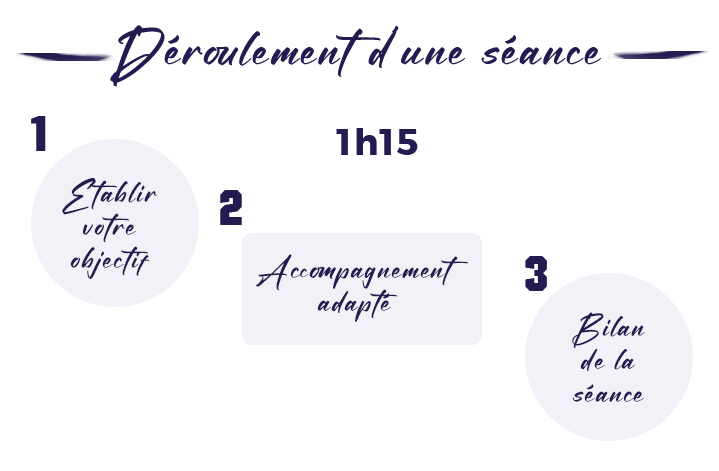
<style>
.page{position:relative;width:719px;height:471px;background:#ffffff}
.page>*{position:absolute;margin:0}
.t1{font:60px "Blacklist";letter-spacing:0.05em;color:#221c51}
.t2{font:48px "Autumn";letter-spacing:0.05em;color:#221c51}
.t3{font:36px "Gontserrat-Bold";letter-spacing:0.05em;color:#221c51}
.t4{font:36px/33px "Blacklist";letter-spacing:0.05em;color:#221c51}
</style>
<div class="page">
<p class="t1" style="left:110px;top:25px;width:492px;height:62px">Déroulement d’une séance</p>
<p class="t2" style="left:31px;top:116px;width:15px;height:35px">1</p>
<p class="t3" style="left:336px;top:128px;width:82px;height:27px">1h15</p>
<p class="t4" style="left:62px;top:178px;width:95px;height:101px;text-align:center">Etablir<br>votre<br>objectif</p>
<p class="t2" style="left:220px;top:190px;width:22px;height:35px">2</p>
<p class="t4" style="left:256px;top:254px;width:212px;height:68px;text-align:center">Accompagnement<br>adapté</p>
<p class="t2" style="left:525px;top:256px;width:22px;height:35px">3</p>
<p class="t4" style="left:572px;top:312px;width:73px;height:90px;text-align:center">Bilan<br>de la<br>séance</p>
</div>
